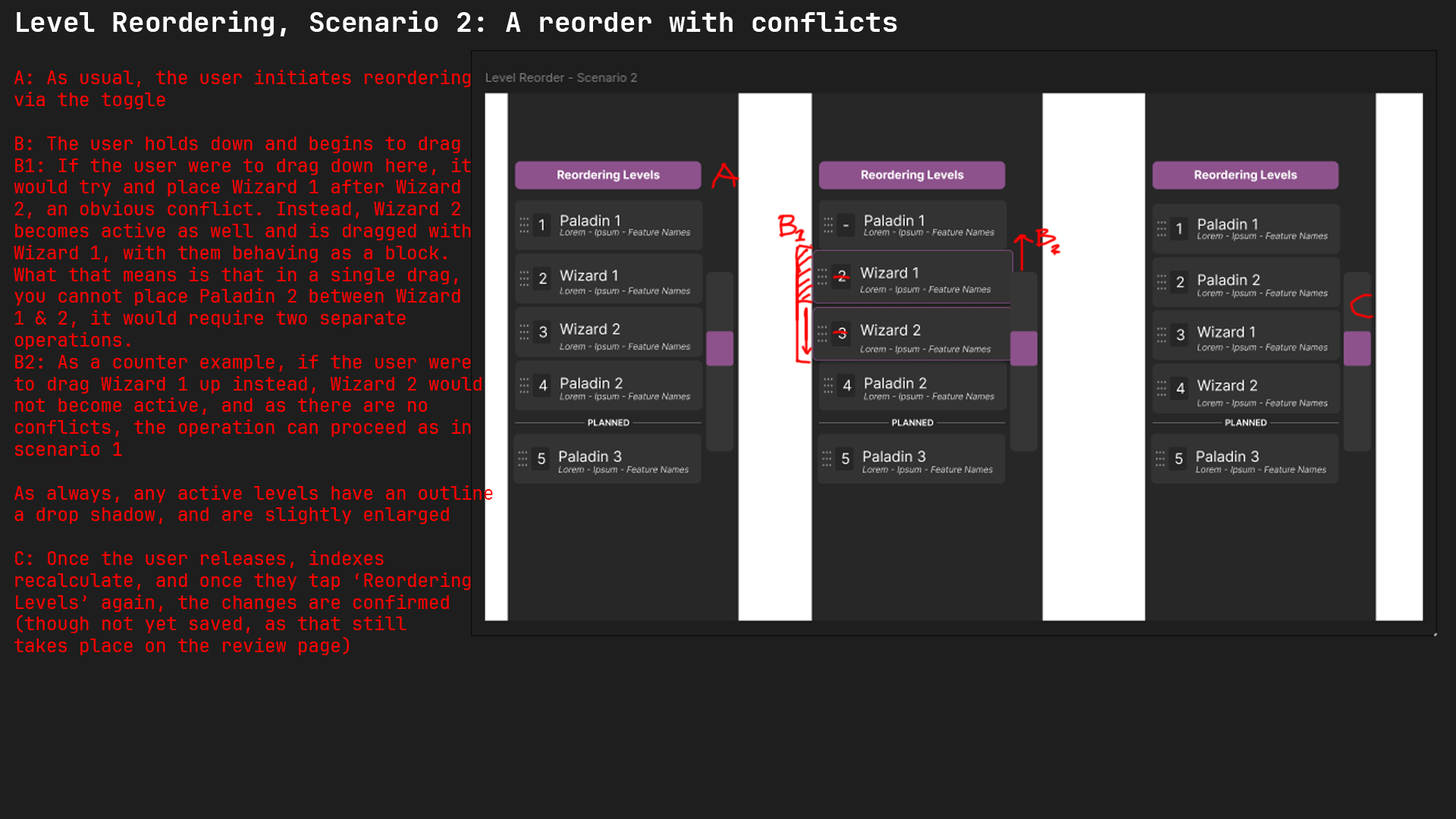
<style>
.page{position:relative;width:1456px;height:819px;background:#1e1e1e}
.page>*{position:absolute;margin:0}
.t1{font:27.3px "JetBrainsMonoNF-Bold";color:#fefefe}
.t2{font:18.2px "JetBrainsMonoNF-Regular";color:#ff0000}
</style>
<div class="page">
<p class="t1" style="left:17px;top:11px;width:880px;height:25px">Level Reordering, Scenario 2: A reorder with conflicts</p>
<p class="t2" style="left:14px;top:70px;width:479px;height:585px">A: As usual, the user initiates reordering<br>via the toggle<br><br>B: The user holds down and begins to drag<br>B1: If the user were to drag down here, it<br>would try and place Wizard 1 after Wizard<br>2, an obvious conflict. Instead, Wizard 2<br>becomes active as well and is dragged with<br>Wizard 1, with them behaving as a block.<br>What that means is that in a single drag,<br>you cannot place Paladin 2 between Wizard<br>1 &amp; 2, it would require two separate<br>operations.<br>B2: As a counter example, if the user were<br>to drag Wizard 1 up instead, Wizard 2 would<br>not become active, and as there are no<br>conflicts, the operation can proceed as in<br>scenario 1<br><br>As always, any active levels have an outline<br>a drop shadow, and are slightly enlarged<br><br>C: Once the user releases, indexes<br>recalculate, and once they tap ‘Reordering<br>Levels’ again, the changes are confirmed<br>(though not yet saved, as that still<br>takes place on the review page)</p>
</div>
